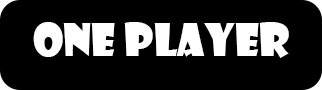
<style>
.page{position:relative;width:322px;height:90px;background:#000000}
.page>*{position:absolute;margin:0}
.t1{font:44px "ShowcardGothic-Reg";color:#ffffff}
</style>
<div class="page">
<p class="t1" style="left:33px;top:22px;width:256px;height:36px">One player</p>
</div>
